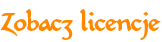
<style>
.page{position:relative;width:162px;height:42px;background:#ffffff}
.page>*{position:absolute;margin:0}
.t1{font:26.6px "CarlinScriptLTStd-Medium";letter-spacing:-0.1em;color:#ff8800}
</style>
<div class="page">
<p class="t1" style="left:0px;top:9px;width:161px;height:31px">Zobacz licencje</p>
</div>
